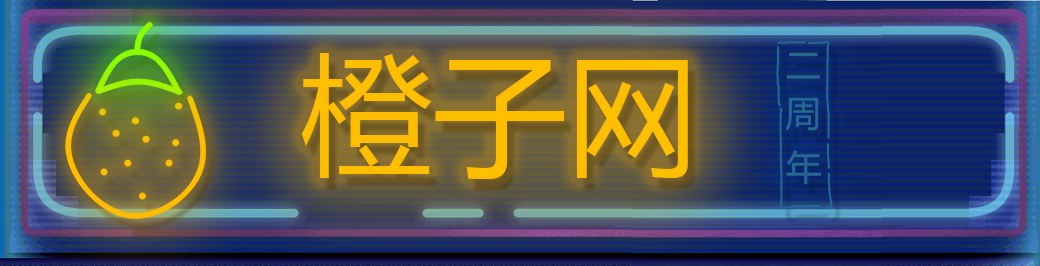
<style>
.page{position:relative;width:1040px;height:266px}
.page>*{position:absolute;margin:0}
.t1{font:133.3px "MicrosoftYaHei";color:#ffc400}
</style>
<div class="page">
<p class="t1" style="left:301px;top:53px;width:387px;height:126px">橙子网</p>
</div>
